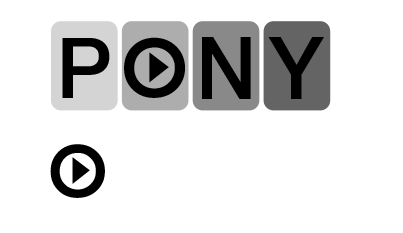
<style>
.page{position:relative;width:403px;height:233px;background:#ffffff}
.page>*{position:absolute;margin:0}
.t1{font:84.1px "HelveticaNeueMedium";color:#000000}
.t2{font:84.1px "Awake-Bold";color:#000000}
.t3{font:75.1px "Awake-Bold";color:#000000}
</style>
<div class="page">
<p class="t1" style="left:62px;top:38px;width:48px;height:60px">P</p>
<p class="t2" style="left:124px;top:37px;width:61px;height:61px">O</p>
<p class="t1" style="left:202px;top:37px;width:49px;height:62px">N</p>
<p class="t1" style="left:268px;top:37px;width:56px;height:62px">Y</p>
<p class="t3" style="left:50px;top:144px;width:55px;height:54px">O</p>
</div>
